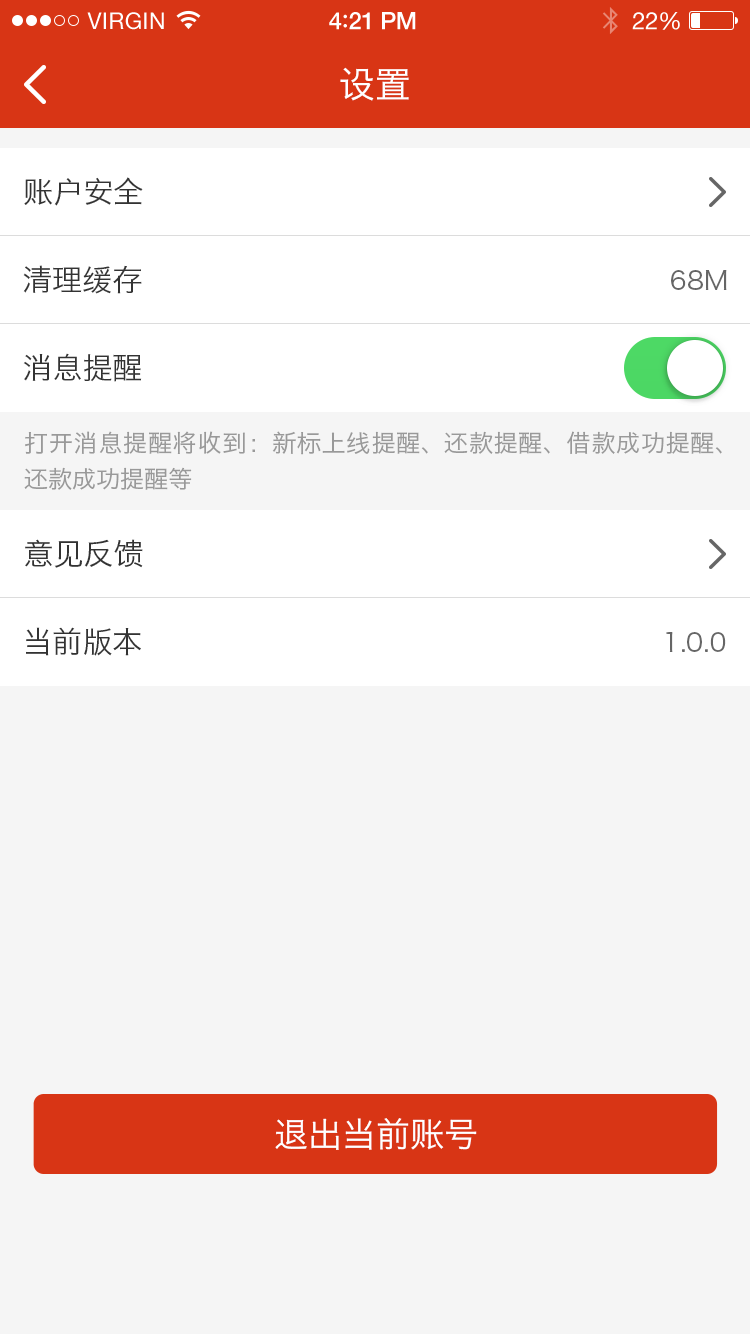
<style>
.page{position:relative;width:750px;height:1334px;background:#f5f5f5}
.page>*{position:absolute;margin:0}
.t1{font:23px "HelveticaNeue";letter-spacing:0.02em;color:#ffffff}
.t2{font:24px "HelveticaNeue-Medium";letter-spacing:-0.02em;color:#ffffff}
.t3{font:26px "Avenir-Medium";letter-spacing:-0.02em;color:#ffffff}
.t4{font:24px "HelveticaNeue";letter-spacing:-0.02em;color:#ffffff}
.t5{font:36px "HiraginoSansGB-W3";color:#ffffff}
.t6{font:30px "HiraginoSansGB-W3";color:#333333}
.t7{font:26px "HiraginoSansGB-W3";color:#666666}
.t8{font:24px/36px "HiraginoSansGB-W3";color:#999999}
.t9{font:34px "HiraginoSansGB-W3";color:#ffffff}
</style>
<div class="page">
<p class="t1" style="left:87px;top:12px;width:77px;height:18px">VIRGIN</p>
<p class="t2" style="left:329px;top:12px;width:87px;height:18px">4<span class="t3">:</span>21 PM</p>
<p class="t4" style="left:632px;top:12px;width:48px;height:18px">22%</p>
<p class="t5" style="left:340px;top:67px;width:69px;height:34px">设置</p>
<p class="t6" style="left:24px;top:177px;width:119px;height:29px">账户安全</p>
<p class="t6" style="left:23px;top:265px;width:119px;height:29px">清理缓存</p>
<p class="t7" style="left:671px;top:270px;width:56px;height:20px">68M</p>
<p class="t6" style="left:23px;top:353px;width:119px;height:29px">消息提醒</p>
<p class="t8" style="left:24px;top:431px;width:698px;height:59px;text-align:justify">打开消息提醒将收到 ：新标上线提醒、还款提醒、借款成功提醒、还款成功提醒等</p>
<p class="t6" style="left:25px;top:539px;width:118px;height:29px">意见反馈</p>
<p class="t6" style="left:26px;top:627px;width:115px;height:29px">当前版本</p>
<p class="t7" style="left:666px;top:632px;width:60px;height:20px">1.0.0</p>
<p class="t9" style="left:275px;top:1118px;width:202px;height:32px">退出当前账号</p>
</div>
